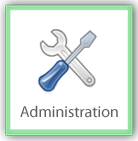
<style>
.page{position:relative;width:138px;height:141px;background:#ffffff}
.page>*{position:absolute;margin:0}
.t1{font:15.9px "MyriadPro-Regular";color:#615f5f}
</style>
<div class="page">
<p class="t1" style="left:20px;top:105px;width:98px;height:13px">Administration</p>
</div>
